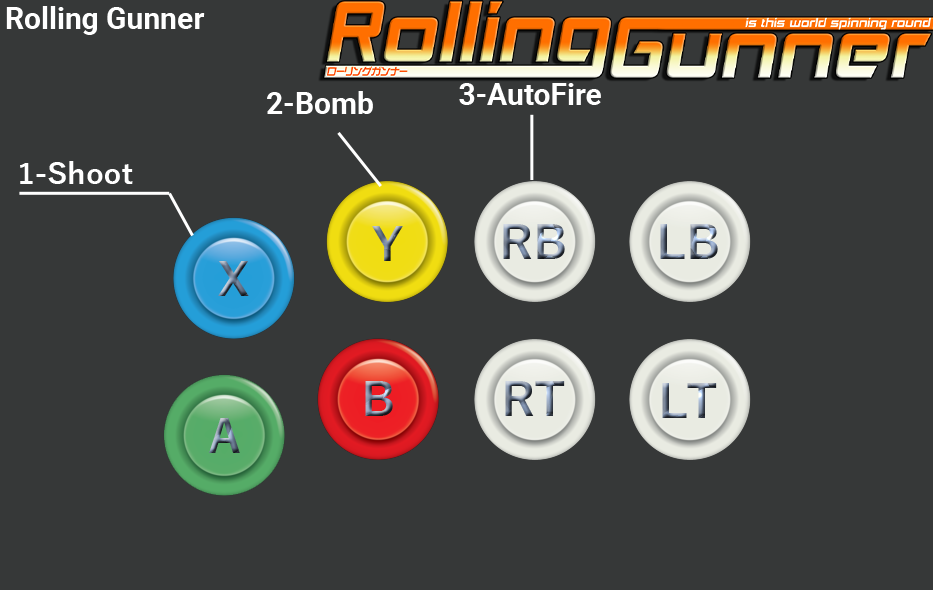
<style>
.page{position:relative;width:933px;height:590px;background:#363838}
.page>*{position:absolute;margin:0}
.t1{font:30px "Roboto-Bold";color:#ffffff}
.t2{font:30px "YuGothic-Bold";color:#ffffff}
</style>
<div class="page">
<p class="t1" style="left:6px;top:6px;width:199px;height:29px">Rolling Gunner</p>
<p class="t1" style="left:459px;top:83px;width:142px;height:22px">3-AutoFire</p>
<p class="t1" style="left:267px;top:91px;width:106px;height:23px">2-Bomb</p>
<p class="t2" style="left:20px;top:161px;width:113px;height:23px">1-Shoot</p>
</div>
